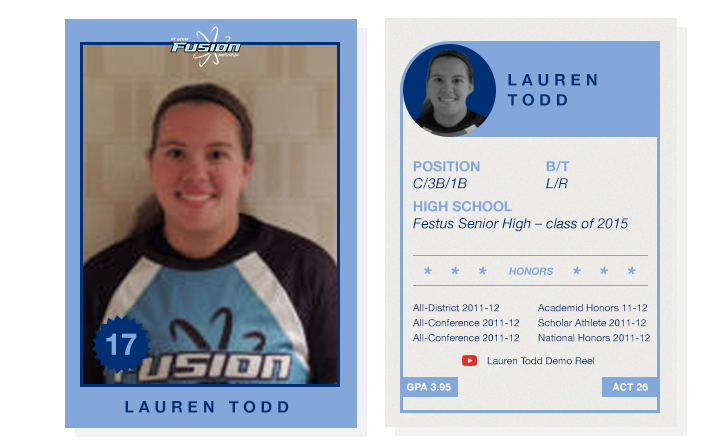
<style>
.page{position:relative;width:719px;height:445px;background:#ffffff}
.page>*{position:absolute;margin:0}
.t1{font:16px/20px "HelveticaNeue-Bold";letter-spacing:0.3em;color:#003074;text-transform:uppercase}
.t2{font:14px "HelveticaNeue-Bold";color:#83a7da;text-transform:uppercase}
.t3{font:14px "HelveticaNeue-Italic";color:#003074;text-transform:uppercase}
.t4{font:14px "HelveticaNeue-Italic";color:#003074}
.t5{font:22px "HelveticaNeue-BoldItalic";color:#83a7da;text-transform:uppercase}
.t6{font:10px "HelveticaNeue-BoldItalic";color:#83a7da;text-transform:uppercase}
.t7{font:10px "HelveticaNeue";color:#003074}
.t8{font:30px "HelveticaNeue-Bold";color:#83a7da;font-variant:small-caps}
.t9{font:10px "HelveticaNeue-Bold";letter-spacing:0.025em;color:#ffffff}
.t10{font:16px "HelveticaNeue-Bold";letter-spacing:0.3em;color:#003074;text-transform:uppercase}
</style>
<div class="page">
<p class="t1" style="left:507px;top:74px;width:90px;height:32px">Lauren <br>Todd</p>
<p class="t2" style="left:413px;top:161px;width:67px;height:11px">Position</p>
<p class="t2" style="left:546px;top:161px;width:24px;height:11px">B/T</p>
<p class="t3" style="left:413px;top:178px;width:54px;height:11px">C/3B/1B</p>
<p class="t3" style="left:546px;top:178px;width:22px;height:11px">L/R</p>
<p class="t2" style="left:413px;top:201px;width:99px;height:11px">High School</p>
<p class="t4" style="left:413px;top:218px;width:215px;height:14px">Festus Senior High – class of 2015</p>
<p class="t5" style="left:424px;top:266px;width:63px;height:9px">*   *   *</p>
<p class="t6" style="left:509px;top:267px;width:45px;height:8px">Honors</p>
<p class="t5" style="left:573px;top:266px;width:63px;height:9px">*   *   *</p>
<p class="t7" style="left:413px;top:304px;width:86px;height:8px">All-District 2011-12</p>
<p class="t7" style="left:538px;top:304px;width:109px;height:8px">Academid Honors 11-12</p>
<p class="t7" style="left:413px;top:319px;width:106px;height:8px">All-Conference 2011-12</p>
<p class="t7" style="left:538px;top:319px;width:108px;height:8px">Scholar Athlete 2011-12</p>
<p class="t8" style="left:106px;top:333px;width:31px;height:22px">17</p>
<p class="t7" style="left:413px;top:334px;width:106px;height:8px">All-Conference 2011-12</p>
<p class="t7" style="left:538px;top:334px;width:112px;height:8px">National Honors 2011-12</p>
<p class="t7" style="left:487px;top:357px;width:107px;height:8px">Lauren Todd Demo Reel</p>
<p class="t9" style="left:407px;top:383px;width:44px;height:8px">GPA 3.95</p>
<p class="t9" style="left:612px;top:383px;width:36px;height:8px">ACT 26</p>
<p class="t10" style="left:125px;top:400px;width:164px;height:13px">Lauren Todd</p>
</div>
